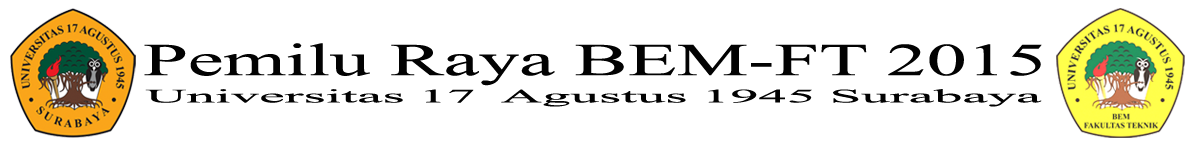
<style>
.page{position:relative;width:1200px;height:150px;background:#ffffff}
.page>*{position:absolute;margin:0}
.t1{font:45.8px "TimesNewRomanPSMT";color:#020202;scale:1.75 1}
.t2{font:18.9px "TimesNewRomanPSMT";color:#020202;scale:3.01 1}
</style>
<div class="page">
<p class="t1" style="left:144px;top:43px;width:898px;height:43px">Pemilu Raya BEM-FT 2015</p>
<p class="t2" style="left:145px;top:89px;width:897px;height:18px">Universitas 17  Agustus 1945 Surabaya</p>
</div>
